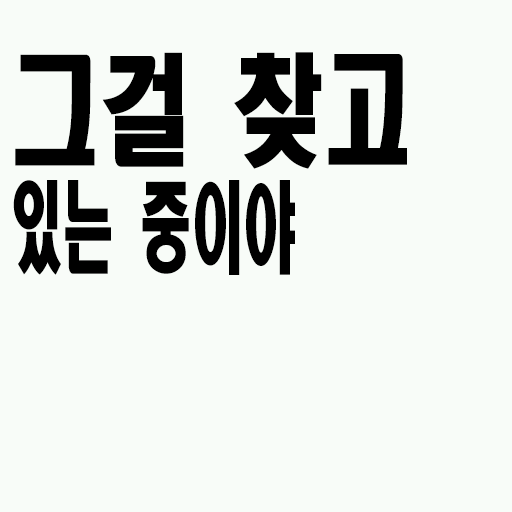
<style>
.page{position:relative;width:512px;height:512px;background:#f8fcf8}
.page>*{position:absolute;margin:0}
.t1{font:98.8px/120px "HeadlineR-HM";color:#000000;scale:0.53 1}
.t2{font:121.6px/120px "HeadlineR-HM";color:#000000;scale:0.74 1}
</style>
<div class="page">
<p class="t1" style="left:13px;top:52px;width:394px;height:223px"><span class="t2">그걸 찾고<br></span>있는 중이야</p>
</div>
